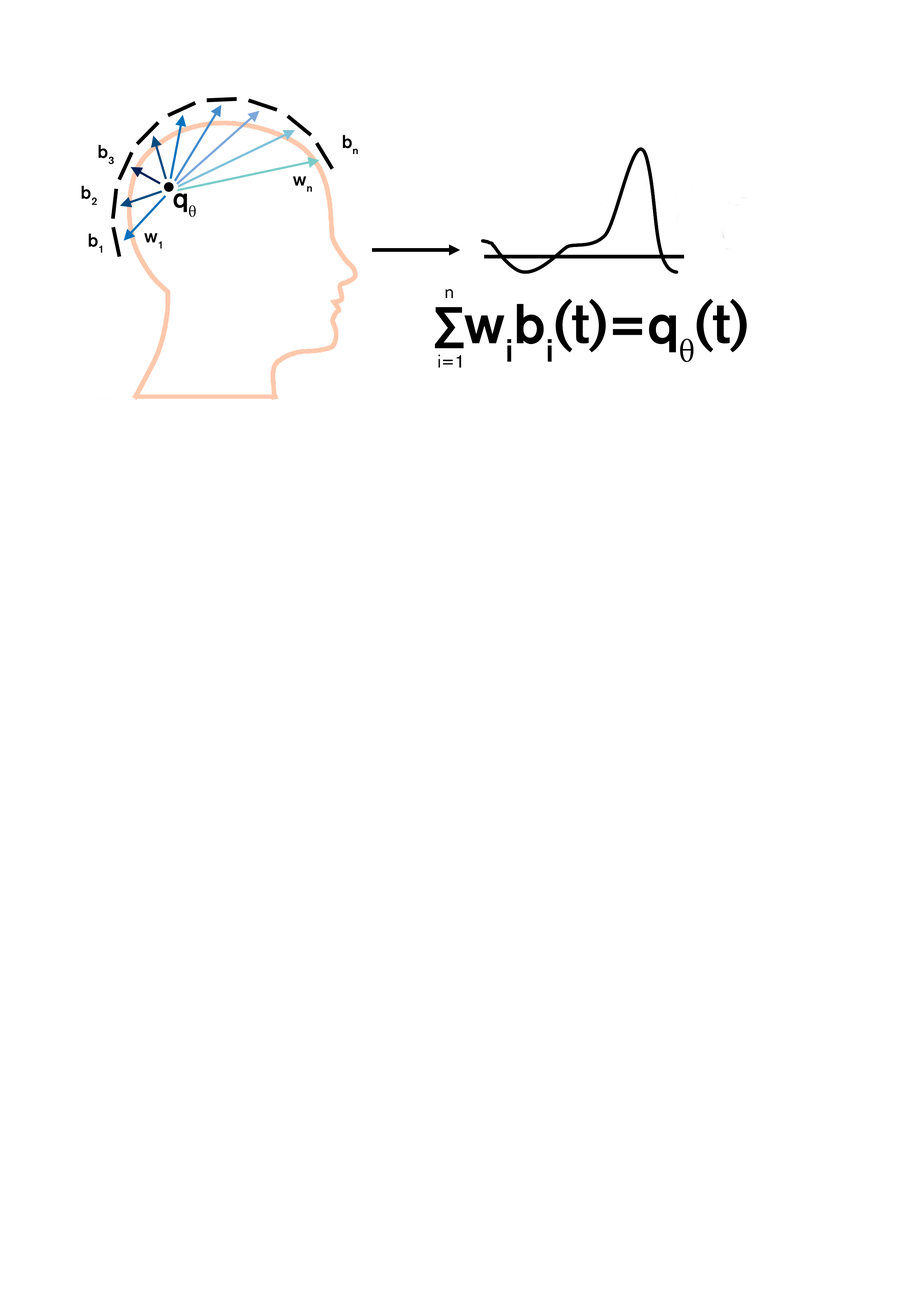
<style>
.page{position:relative;width:918px;height:1299px;background:#ffffff}
.page>*{position:absolute;margin:0}
.t1{font:4.4px/21.6px "AkzidenzGroteskBQ-Medium";color:#000000}
.t2{font:18.5px "AkzidenzGroteskBQ-Medium";color:#000000}
.t3{font:27.8px "AkzidenzGroteskBE-Md";color:#000000}
.t4{font:27.8px "MinionPro-Regular";color:#000000}
.t5{font:4.4px/21.6px "AkzidenzGroteskBQ-Reg";color:#000000}
.t6{font:55.5px "AkzidenzGroteskBQ-Medium";color:#000000}
.t7{font:55.5px "MyriadPro-Semibold";color:#000000}
.t8{font:55.5px "MinionPro-Regular";color:#000000}
.t9{font:18.5px "AkzidenzGroteskBQ-Reg";color:#000000}
</style>
<div class="page">
<p class="t1" style="left:343px;top:135px;width:15px;height:19px;text-align:justify">bn</p>
<p class="t1" style="left:98px;top:145px;width:16px;height:19px;text-align:justify">b3</p>
<p class="t2" style="left:81px;top:185px;width:16px;height:20px">b2</p>
<p class="t1" style="left:293px;top:176px;width:19px;height:16px;text-align:justify">wn</p>
<p class="t3" style="left:173px;top:193px;width:23px;height:24px">q<span class="t4">θ</span></p>
<p class="t2" style="left:88px;top:233px;width:14px;height:20px">b1</p>
<p class="t2" style="left:144px;top:233px;width:18px;height:16px">w1</p>
<p class="t5" style="left:446px;top:289px;width:7px;height:9px;text-align:justify">n</p>
<p class="t6" style="left:435px;top:298px;width:312px;height:64px"><span class="t7">∑</span>wibi(t)=q<span class="t8">θ</span>(t)</p>
<p class="t9" style="left:438px;top:354px;width:23px;height:14px">i=1</p>
</div>
